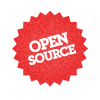
<style>
.page{position:relative;width:100px;height:100px;background:#ffffff}
.page>*{position:absolute;margin:0}
.t1{font:13.3px/11.7px "Archer-BoldLF";letter-spacing:-0.075em;color:#ffffff;font-weight:bold}
.t2{font:16px/15.3px "Archer-BoldLF";letter-spacing:-0.075em;color:#ffffff;font-weight:bold}
</style>
<div class="page">
<p class="t1" style="left:28px;top:32px;width:49px;height:33px;text-align:center;rotate:-15deg"><span class="t2">OPEN<br></span>SOURCE</p>
</div>
